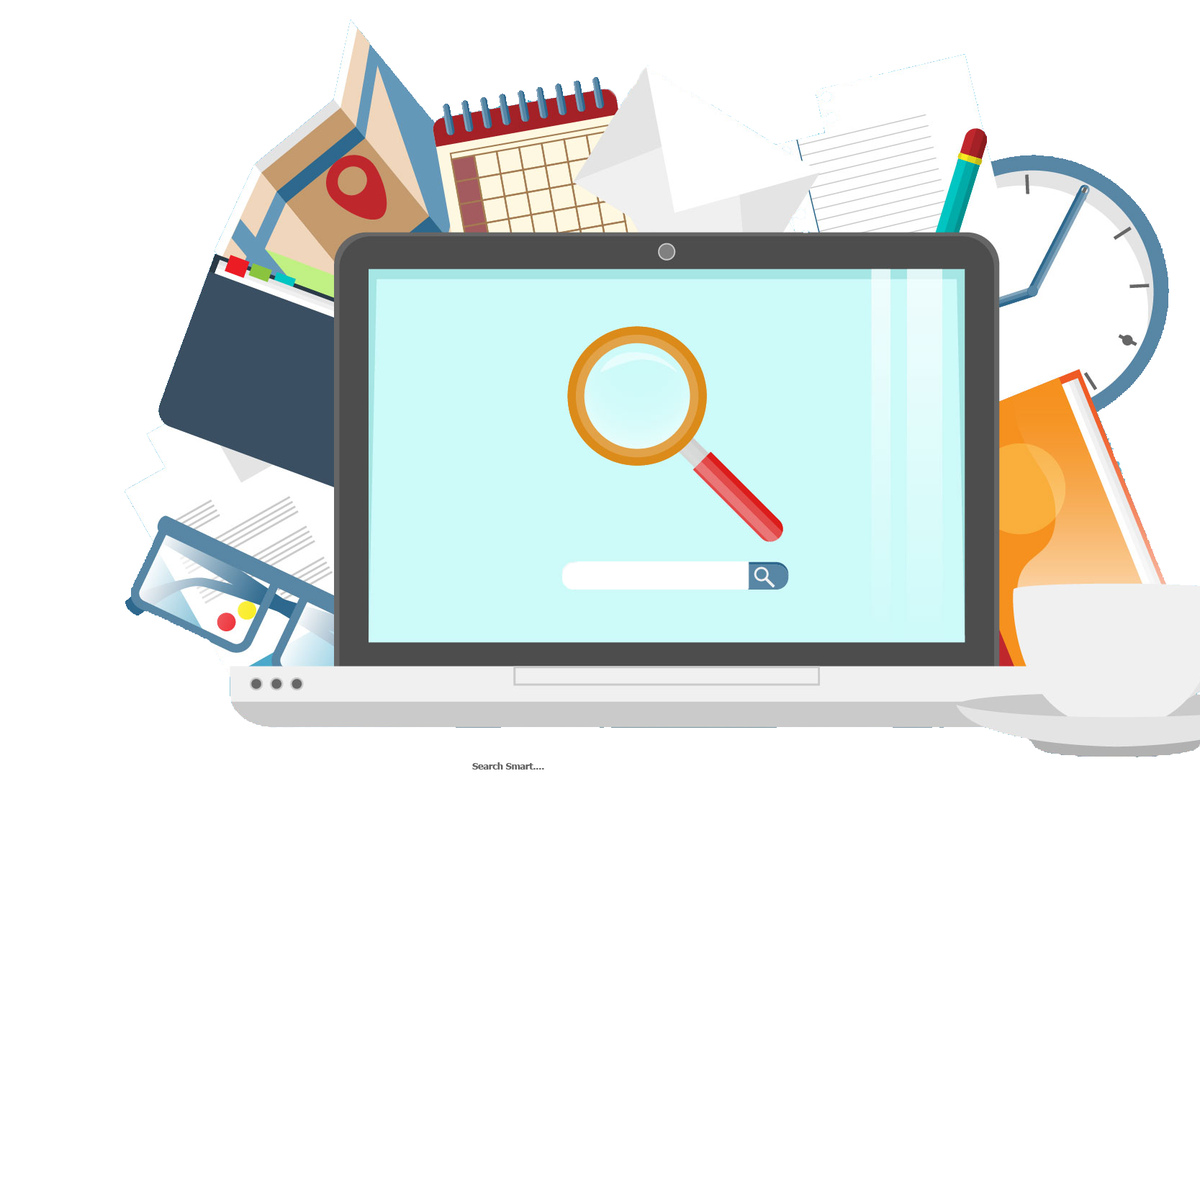
<style>
.page{position:relative;width:1200px;height:1200px;background:#ffffff}
.page>*{position:absolute;margin:0}
.t1{font:9px "Tahoma-Bold";color:#606060}
</style>
<div class="page">
<p class="t1" style="left:472px;top:762px;width:72px;height:8px">Search Smart....</p>
</div>
